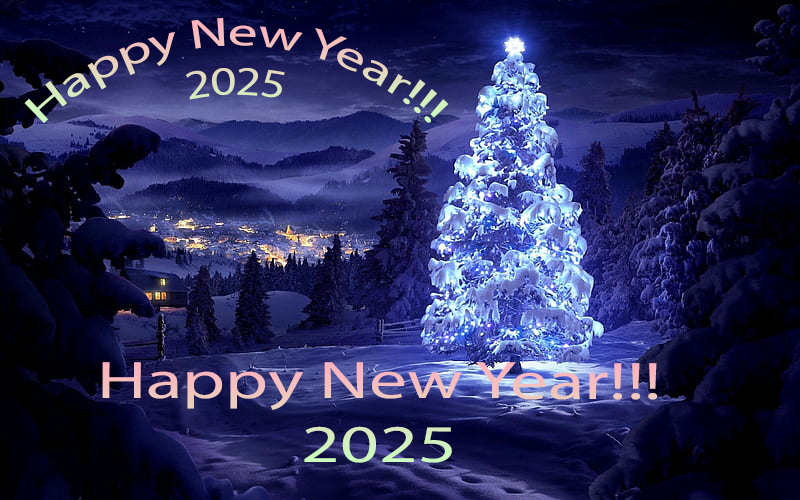
<style>
.page{position:relative;width:800px;height:500px}
.page>*{position:absolute;margin:0}
.t1{font:41px "MyriadPro-Regular"}
.t2{font:53.2px "MyriadPro-Regular";color:#f4c1be;scale:1.42 1}
</style>
<div class="page">
<p class="t1" style="left:24px;top:18px;width:425px;height:106px;text-align:center">Happy New Year!!!<br>2025</p>
<p class="t2" style="left:102px;top:362px;width:556px;height:101px;text-align:center">Happy New Year!!!<br>2025</p>
</div>
